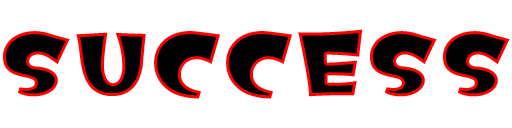
<style>
.page{position:relative;width:512px;height:128px;background:#ffffff}
.page>*{position:absolute;margin:0}
.t1{font:90px "Memoir-Square";color:#000000}
</style>
<div class="page">
<p class="t1" style="left:3px;top:29px;width:507px;height:70px">SUCCESS</p>
</div>
